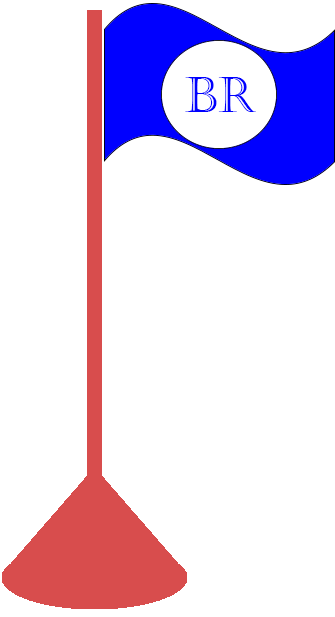
<style>
.page{position:relative;width:335px;height:617px;background:#ffffff}
.page>*{position:absolute;margin:0}
.t1{font:49px "Castellar";color:#0000ff}
</style>
<div class="page">
<p class="t1" style="left:185px;top:77px;width:71px;height:35px">BR</p>
</div>
